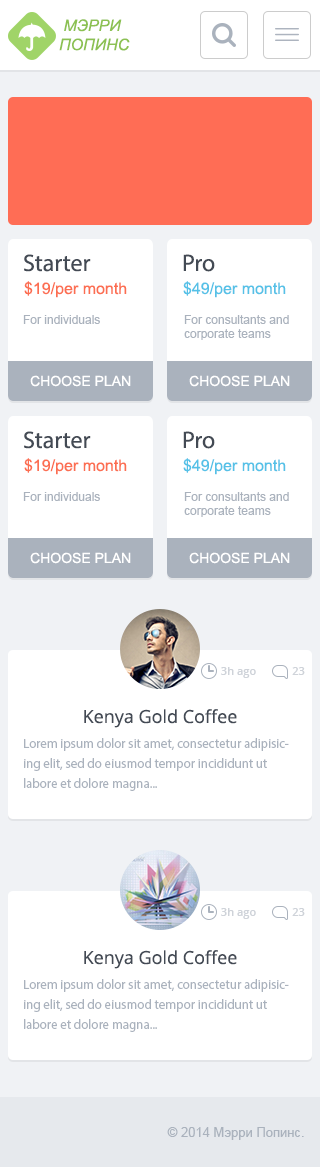
<style>
.page{position:relative;width:320px;height:1167px;background:#ffffff}
.page>*{position:absolute;margin:0}
.t1{font:16px "Arial-ItalicMT";color:#8cc152;text-transform:uppercase}
.t2{font:24px "MyriadPro-Regular";color:#434a54}
.t3{font:16px "ArialMT";color:#fc6e51}
.t4{font:16px "ArialMT";color:#55c1e7}
.t5{font:12px "ArialMT";color:#aab2bd}
.t6{font:14px "ArialMT";color:#ffffff;text-transform:uppercase}
.t7{font:11px "OpenSans-Semibold";color:#cfd3d9}
.t8{font:18px "OpenSans";color:#434a54}
.t9{font:13px/20px "MyriadPro-Regular";color:#aab2bd}
.t10{font:13px "ArialMT";color:#aab2bd}
</style>
<div class="page">
<p class="t1" style="left:59px;top:19px;width:71px;height:32px">Мэрри <br>попинс</p>
<p class="t2" style="left:24px;top:254px;width:67px;height:18px">Starter</p>
<p class="t2" style="left:183px;top:254px;width:32px;height:18px">Pro</p>
<p class="t3" style="left:24px;top:281px;width:103px;height:17px">$19/per month</p>
<p class="t4" style="left:183px;top:281px;width:103px;height:17px">$49/per month</p>
<p class="t5" style="left:23px;top:315px;width:77px;height:9px">For individuals</p>
<p class="t5" style="left:184px;top:315px;width:105px;height:25px">For consultants and <br>corporate teams</p>
<p class="t6" style="left:30px;top:375px;width:101px;height:12px">Choose plan</p>
<p class="t6" style="left:189px;top:375px;width:101px;height:12px">Choose plan</p>
<p class="t2" style="left:24px;top:431px;width:67px;height:18px">Starter</p>
<p class="t2" style="left:183px;top:431px;width:32px;height:18px">Pro</p>
<p class="t3" style="left:24px;top:458px;width:103px;height:17px">$19/per month</p>
<p class="t4" style="left:183px;top:458px;width:103px;height:17px">$49/per month</p>
<p class="t5" style="left:23px;top:492px;width:77px;height:9px">For individuals</p>
<p class="t5" style="left:184px;top:492px;width:105px;height:25px">For consultants and <br>corporate teams</p>
<p class="t6" style="left:30px;top:552px;width:101px;height:12px">Choose plan</p>
<p class="t6" style="left:189px;top:552px;width:101px;height:12px">Choose plan</p>
<p class="t7" style="left:221px;top:667px;width:35px;height:11px">3h ago</p>
<p class="t7" style="left:292px;top:667px;width:13px;height:8px">23</p>
<p class="t8" style="left:84px;top:709px;width:153px;height:19px">Kenya Gold Coffee</p>
<p class="t9" style="left:24px;top:738px;width:265px;height:53px">Lorem ipsum dolor sit amet, consectetur adipisicing elit, sed do eiusmod tempor incididunt ut labore et dolore magna...</p>
<p class="t7" style="left:221px;top:908px;width:35px;height:11px">3h ago</p>
<p class="t7" style="left:292px;top:908px;width:13px;height:8px">23</p>
<p class="t8" style="left:84px;top:950px;width:153px;height:19px">Kenya Gold Coffee</p>
<p class="t9" style="left:24px;top:979px;width:265px;height:53px">Lorem ipsum dolor sit amet, consectetur adipisicing elit, sed do eiusmod tempor incididunt ut labore et dolore magna...</p>
<p class="t10" style="left:167px;top:1127px;width:137px;height:13px">© 2014 Мэрри Попинс.</p>
</div>
